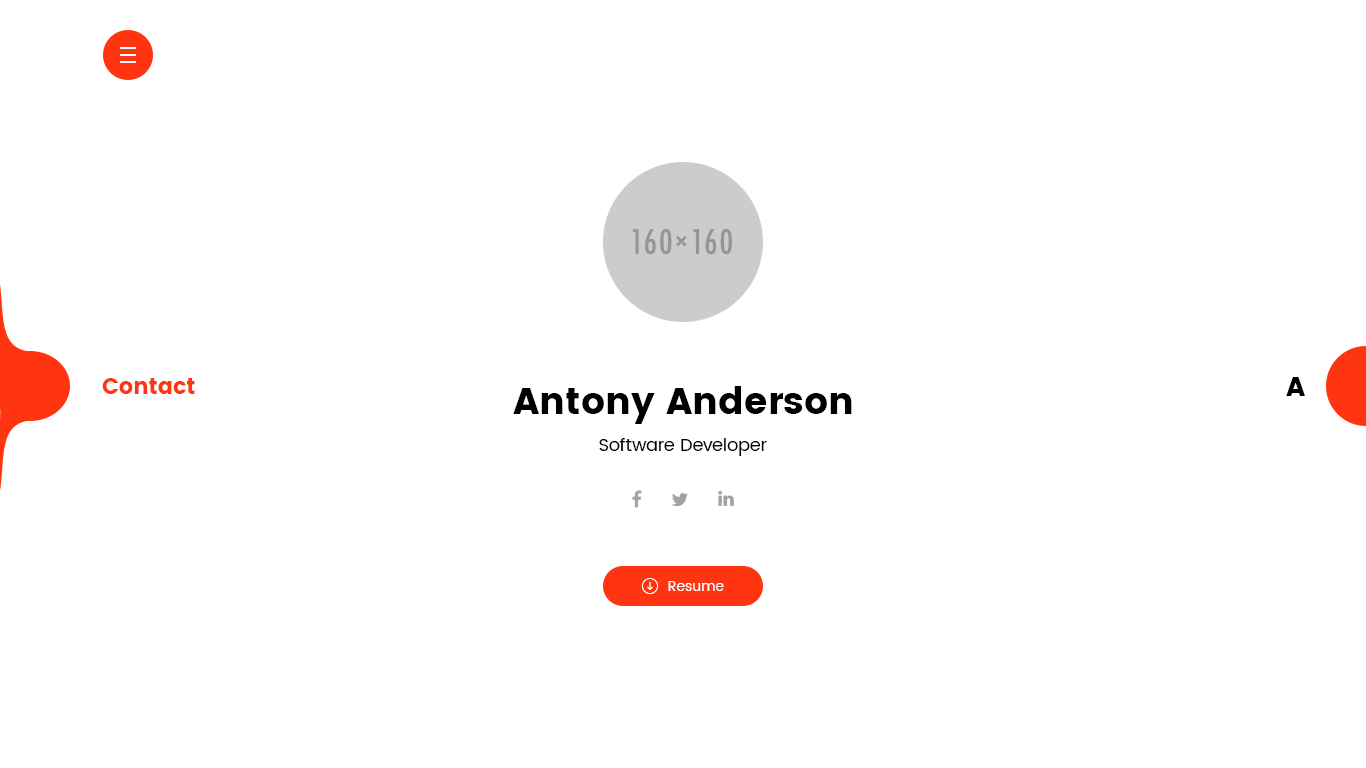
<style>
.page{position:relative;width:1366px;height:768px;background:#ffffff}
.page>*{position:absolute;margin:0}
.t1{font:27px "Poppins";color:#000000}
.t2{font:22px "Poppins";color:#ff3411}
.t3{font:37px "Poppins";color:#000000}
.t4{font:18px "Poppins-Regular";color:#000000}
.t5{font:14px "Poppins-Regular";color:#ffffff}
</style>
<div class="page">
<p class="t1" style="left:1286px;top:377px;width:19px;height:19px">A</p>
<p class="t2" style="left:102px;top:378px;width:93px;height:16px">Contact</p>
<p class="t3" style="left:513px;top:386px;width:339px;height:38px">Antony Anderson</p>
<p class="t4" style="left:599px;top:438px;width:168px;height:18px">Software Developer</p>
<p class="t5" style="left:668px;top:581px;width:56px;height:10px">Resume</p>
</div>
